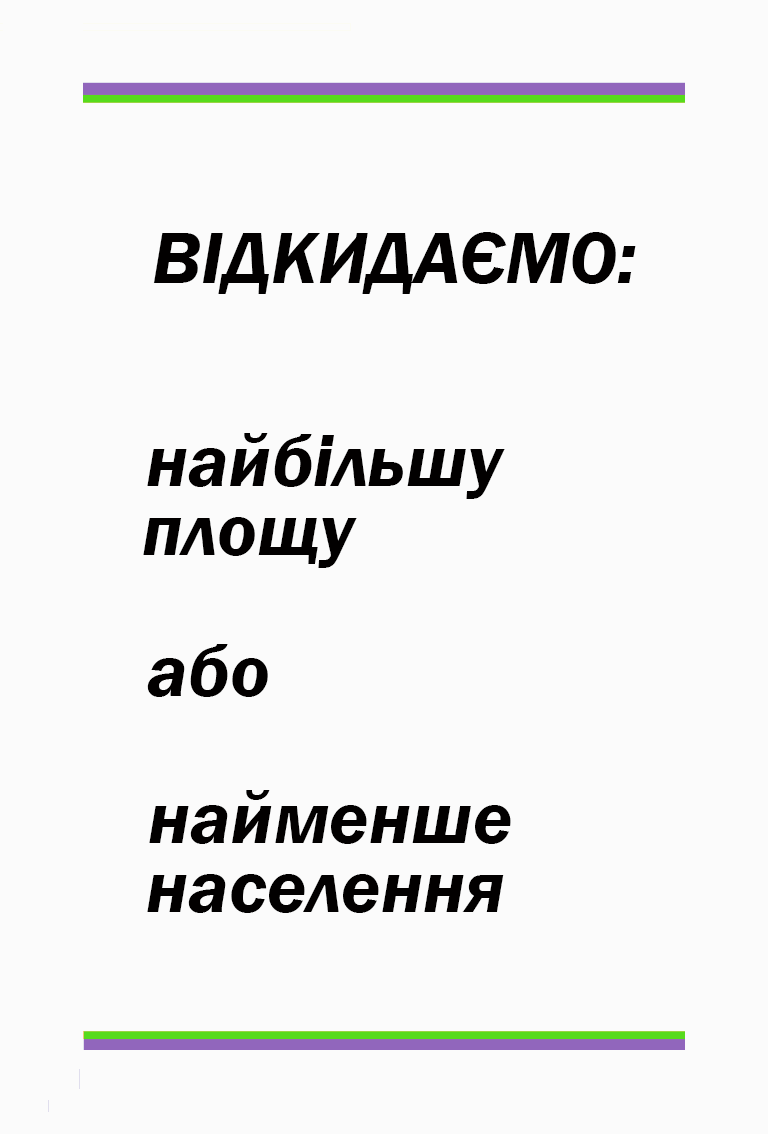
<style>
.page{position:relative;width:768px;height:1134px;background:#fbfbfb}
.page>*{position:absolute;margin:0}
.t1{font:75px "FranklinGothic-DemiItalic";color:#020000}
</style>
<div class="page">
<p class="t1" style="left:153px;top:232px;width:483px;height:62px">ВІДКИДАЄМО:</p>
<p class="t1" style="left:147px;top:433px;width:358px;height:66px">найбільшу</p>
<p class="t1" style="left:143px;top:517px;width:214px;height:51px">площу</p>
<p class="t1" style="left:147px;top:644px;width:121px;height:53px">або</p>
<p class="t1" style="left:149px;top:790px;width:362px;height:54px">найменше</p>
<p class="t1" style="left:147px;top:874px;width:357px;height:39px">населення</p>
</div>
